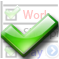
<style>
.page{position:relative;width:59px;height:59px}
.page>*{position:absolute;margin:0}
.t1{font:12px "MyriadPro-Regular";color:#ffc7c7}
</style>
<div class="page">
<p class="t1" style="left:23px;top:10px;width:27px;height:9px">Work</p>
</div>
